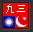
<style>
.page{position:relative;width:33px;height:32px;background:#f20000}
.page>*{position:absolute;margin:0}
.t1{font:10.4px "SimSun";color:#ffffff}
</style>
<div class="page">
<p class="t1" style="left:6px;top:4px;width:19px;height:9px">九三</p>
</div>
